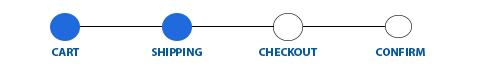
<style>
.page{position:relative;width:480px;height:68px;background:#ffffff}
.page>*{position:absolute;margin:0}
.t1{font:11.1px "MyriadHebrew-Bold";color:#035c9b;scale:1.06 1}
</style>
<div class="page">
<p class="t1" style="left:51px;top:48px;width:29px;height:8px">CART</p>
<p class="t1" style="left:152px;top:48px;width:50px;height:8px">SHIPPING</p>
<p class="t1" style="left:259px;top:48px;width:59px;height:8px">CHECKOUT</p>
<p class="t1" style="left:375px;top:48px;width:50px;height:8px">CONFIRM</p>
</div>
